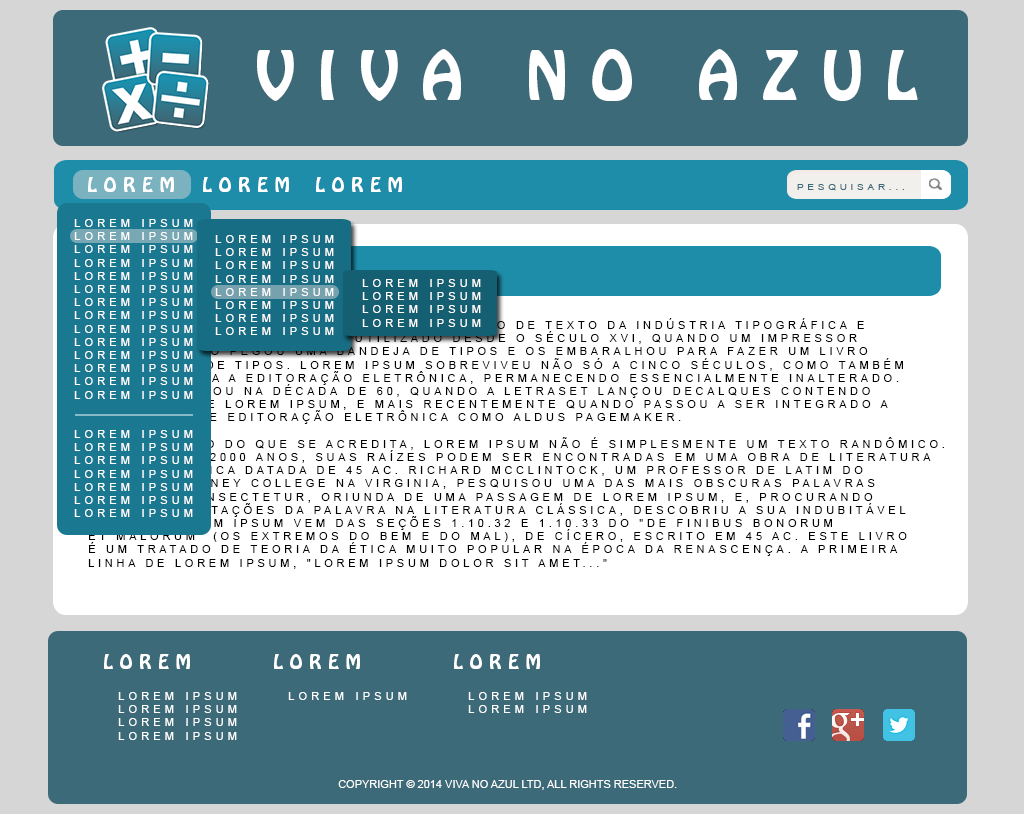
<style>
.page{position:relative;width:1024px;height:814px;background:#ffffff}
.page>*{position:absolute;margin:0}
.t1{font:60px "HoboStd";letter-spacing:0.38em;color:#ffffff;text-transform:uppercase}
.t2{font:18px "HoboStd";letter-spacing:0.38em;color:#ffffff;text-transform:uppercase}
.t3{font:8px "ArialMT";letter-spacing:0.38em;color:#3c6a79;text-transform:uppercase;scale:1.24 1}
.t4{font:11px "ArialMT";letter-spacing:0.38em;color:#ffffff;text-transform:uppercase}
.t5{font:11px "ArialMT";letter-spacing:0.34em;color:#000000;text-transform:uppercase}
.t6{font:11px "ArialMT";color:#ffffff;text-transform:uppercase}
</style>
<div class="page">
<p class="t1" style="left:257px;top:49px;width:661px;height:52px">Viva no Azul</p>
<p class="t2" style="left:88px;top:177px;width:86px;height:15px">Lorem</p>
<p class="t2" style="left:203px;top:177px;width:86px;height:15px">Lorem</p>
<p class="t2" style="left:316px;top:177px;width:86px;height:15px">Lorem</p>
<p class="t3" style="left:797px;top:184px;width:107px;height:7px">Pesquisar...</p>
<p class="t4" style="left:74px;top:219px;width:119px;height:180px">Lorem Ipsum<br>Lorem Ipsum<br>Lorem Ipsum<br>Lorem Ipsum<br>Lorem Ipsum<br>Lorem Ipsum<br>Lorem Ipsum<br>Lorem Ipsum<br>Lorem Ipsum<br>Lorem Ipsum<br>Lorem Ipsum<br>Lorem Ipsum<br>Lorem Ipsum<br>Lorem Ipsum</p>
<p class="t4" style="left:215px;top:235px;width:119px;height:100px">Lorem Ipsum<br>Lorem Ipsum<br>Lorem Ipsum<br>Lorem Ipsum<br>Lorem Ipsum<br>Lorem Ipsum<br>Lorem Ipsum<br>Lorem Ipsum</p>
<p class="t4" style="left:362px;top:279px;width:119px;height:48px">Lorem Ipsum<br>Lorem Ipsum<br>Lorem Ipsum<br>Lorem Ipsum</p>
<p class="t5" style="left:88px;top:318px;width:856px;height:251px">Lorem Ipsum é simplesmente uma simulação de texto da indústria tipográfica e<br>de impressos, e vem sendo utilizado desde o século XVI, quando um impressor<br>desconhecido pegou uma bandeja de tipos e os embaralhou para fazer um livro<br>de modelos de tipos. Lorem Ipsum sobreviveu não só a cinco séculos, como também<br>ao salto para a editoração eletrônica, permanecendo essencialmente inalterado.<br>Se popularizou na década de 60, quando a Letraset lançou decalques contendo<br>passagens de Lorem Ipsum, e mais recentemente quando passou a ser integrado a<br>softwares de editoração eletrônica como Aldus PageMaker.<br><br>Ao contrário do que se acredita, Lorem Ipsum não é simplesmente um texto randômico.<br>Com mais de 2000 anos, suas raízes podem ser encontradas em uma obra de literatura<br>latina clássica datada de 45 AC. Richard McClintock, um professor de latim do<br>Hampden-Sydney College na Virginia, pesquisou uma das mais obscuras palavras<br>em latim, consectetur, oriunda de uma passagem de Lorem Ipsum, e, procurando<br>por entre citações da palavra na literatura clássica, descobriu a sua indubitável<br>origem. Lorem Ipsum vem das seções 1.10.32 e 1.10.33 do "de Finibus Bonorum<br>et Malorum" (Os Extremos do Bem e do Mal), de Cícero, escrito em 45 AC. Este livro<br>é um tratado de teoria da ética muito popular na época da Renascença. A primeira<br>linha de Lorem Ipsum, "Lorem Ipsum dolor sit amet..."</p>
<p class="t4" style="left:74px;top:430px;width:119px;height:87px">Lorem Ipsum<br>Lorem Ipsum<br>Lorem Ipsum<br>Lorem Ipsum<br>Lorem Ipsum<br>Lorem Ipsum<br>Lorem Ipsum</p>
<p class="t2" style="left:104px;top:654px;width:86px;height:15px">Lorem</p>
<p class="t2" style="left:274px;top:654px;width:86px;height:15px">Lorem</p>
<p class="t2" style="left:454px;top:654px;width:86px;height:15px">Lorem</p>
<p class="t4" style="left:118px;top:692px;width:119px;height:48px">Lorem Ipsum<br>Lorem Ipsum<br>Lorem Ipsum<br>Lorem Ipsum</p>
<p class="t4" style="left:288px;top:692px;width:119px;height:8px">Lorem Ipsum</p>
<p class="t4" style="left:468px;top:692px;width:119px;height:21px">Lorem Ipsum<br>Lorem Ipsum</p>
<p class="t6" style="left:338px;top:780px;width:339px;height:10px">Copyright © 2014 Viva no Azul Ltd, All rights reserved.</p>
</div>
